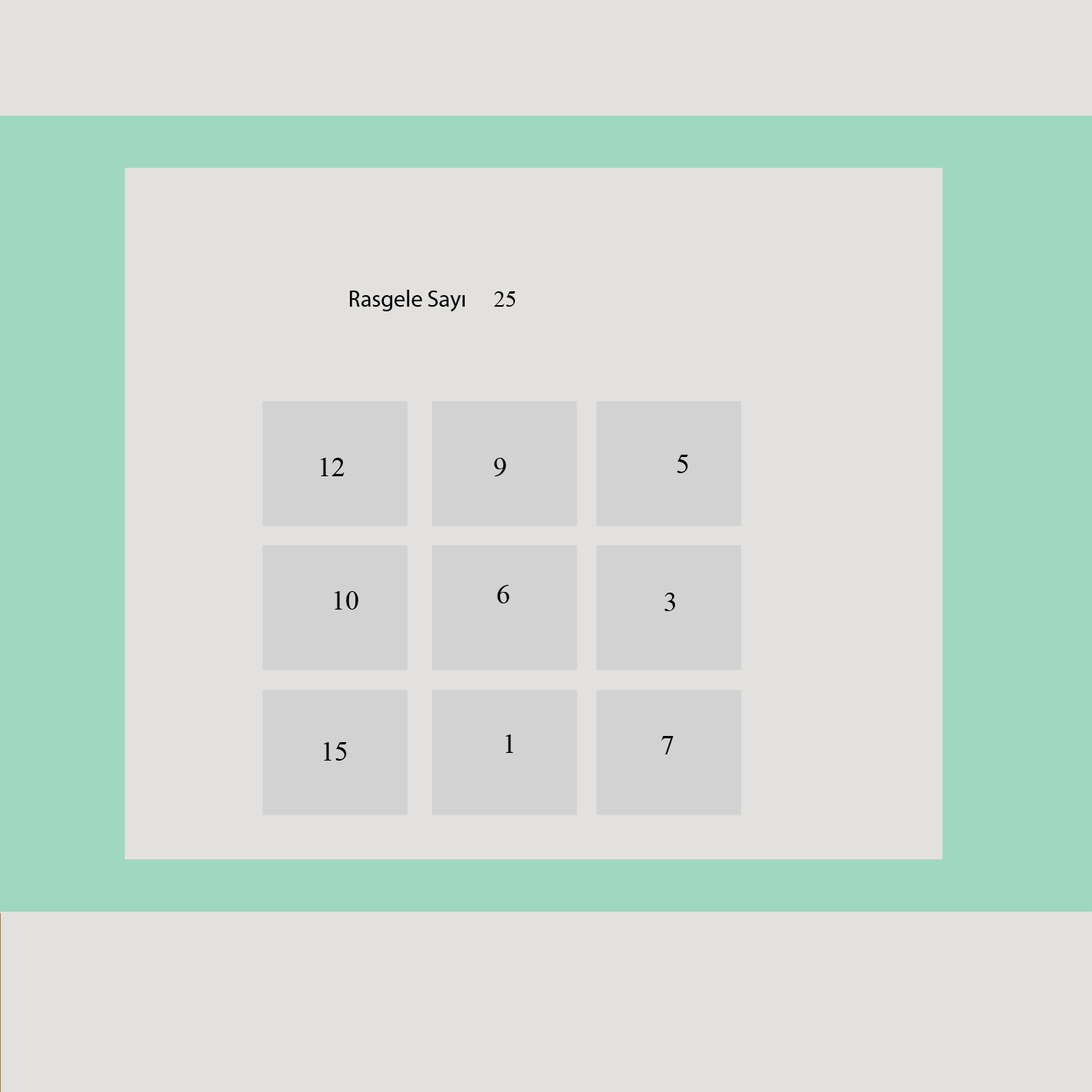
<style>
.page{position:relative;width:1092px;height:1092px;background:#e2e1df}
.page>*{position:absolute;margin:0}
.t1{font:23.1px "MyriadPro-Regular";color:#000000}
.t2{font:23.1px "TimesNewRomanPSMT";color:#000000}
.t3{font:27.7px "TimesNewRomanPSMT";color:#000000}
</style>
<div class="page">
<p class="t1" style="left:350px;top:290px;width:115px;height:22px">Rasgele Sayı</p>
<p class="t2" style="left:494px;top:291px;width:22px;height:16px">25</p>
<p class="t3" style="left:321px;top:458px;width:23px;height:18px">12</p>
<p class="t3" style="left:494px;top:458px;width:12px;height:18px">9</p>
<p class="t3" style="left:677px;top:455px;width:11px;height:18px">5</p>
<p class="t3" style="left:334px;top:591px;width:24px;height:19px">10</p>
<p class="t3" style="left:497px;top:585px;width:12px;height:18px">6</p>
<p class="t3" style="left:664px;top:593px;width:11px;height:18px">3</p>
<p class="t3" style="left:506px;top:734px;width:7px;height:19px">1</p>
<p class="t3" style="left:661px;top:736px;width:13px;height:18px">7</p>
<p class="t3" style="left:324px;top:742px;width:23px;height:19px">15</p>
</div>
